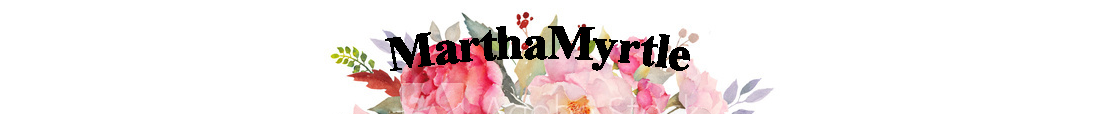
<style>
.page{position:relative;width:1100px;height:114px;background:#ffffff}
.page>*{position:absolute;margin:0}
.t1{font:48px "TimesNewRomanPS-BoldMT";color:#000000}
</style>
<div class="page">
<p class="t1" style="left:385px;top:26px;width:305px;height:45px">MarthaMyrtle</p>
</div>
